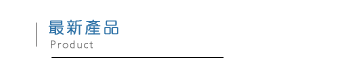
<style>
.page{position:relative;width:350px;height:70px;background:#ffffff}
.page>*{position:absolute;margin:0}
.t1{font:16px "DFYuan-Lt-HK-BF";letter-spacing:0.12em;color:#2d71a6;font-weight:bold}
.t2{font:11px "Humanist521BT-Light";letter-spacing:0.12em;color:#707070;font-weight:bold}
</style>
<div class="page">
<p class="t1" style="left:48px;top:19px;width:71px;height:16px">最新產品</p>
<p class="t2" style="left:51px;top:40px;width:42px;height:9px">Product</p>
</div>
